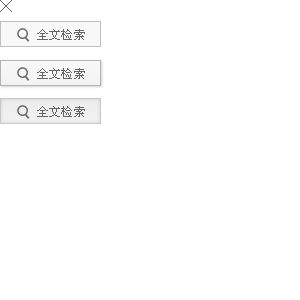
<style>
.page{position:relative;width:300px;height:300px;background:#ffffff}
.page>*{position:absolute;margin:0}
.t1{font:12px "SimSun";letter-spacing:0.02em;color:#666666}
</style>
<div class="page">
<p class="t1" style="left:37px;top:29px;width:48px;height:11px">全文检索</p>
<p class="t1" style="left:37px;top:68px;width:48px;height:11px">全文检索</p>
<p class="t1" style="left:37px;top:106px;width:48px;height:11px">全文检索</p>
</div>
